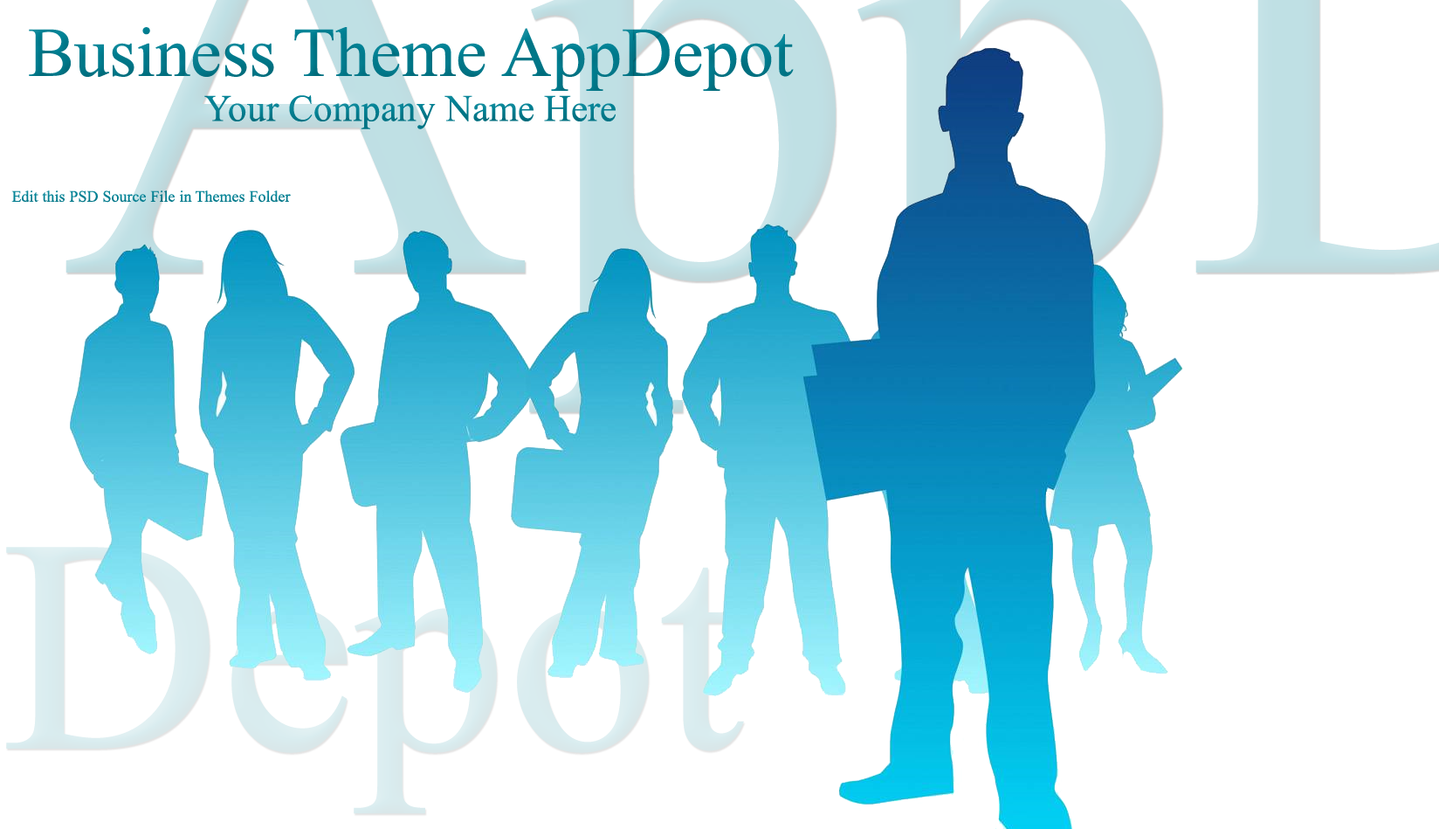
<style>
.page{position:relative;width:1439px;height:829px;background:#ffffff}
.page>*{position:absolute;margin:0}
.t1{font:69.9px "TimesNewRomanPSMT";color:#008295}
.t2{font:37.5px "TimesNewRomanPSMT";color:#008295}
.t3{font:15.7px "TimesNewRomanPSMT";color:#008295}
</style>
<div class="page">
<p class="t1" style="left:29px;top:27px;width:765px;height:102px;text-align:center">Business Theme AppDepot<br><span class="t2">Your Company Name Here</span></p>
<p class="t3" style="left:11px;top:190px;width:280px;height:13px">Edit this PSD Source File in Themes Folder</p>
</div>
